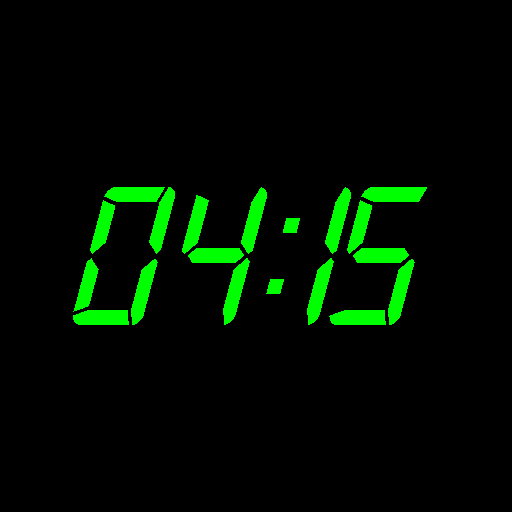
<style>
.page{position:relative;width:512px;height:512px;background:#000000}
.page>*{position:absolute;margin:0}
.t1{font:218.7px "Digital-7Mono";letter-spacing:0.04em;color:#00ff00;scale:0.85 1}
.t2{font:218.7px "Digital-7Mono";letter-spacing:-0.02em;color:#00ff00;scale:0.85 1}
</style>
<div class="page">
<p class="t1" style="left:73px;top:187px;width:194px;height:138px">04</p>
<p class="t2" style="left:307px;top:187px;width:120px;height:138px">1<span class="t1">5</span></p>
<p class="t2" style="left:266px;top:218px;width:34px;height:76px">:</p>
</div>
